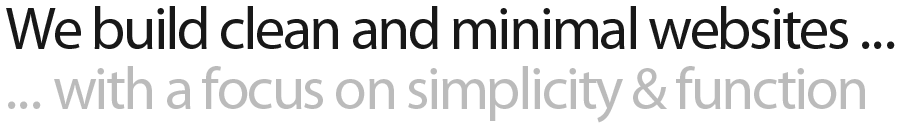
<style>
.page{position:relative;width:899px;height:127px;background:#ffffff}
.page>*{position:absolute;margin:0}
.t1{font:60px/60px "MyriadPro-Regular";letter-spacing:-0.04em;color:#bbbbbb}
.t2{font:60px/60px "MyriadPro-Regular";letter-spacing:-0.04em;color:#181818}
.t3{font:60px/60px "MyriadPro-Regular";color:#181818}
.t4{font:60px/60px "MyriadPro-Regular";color:#bbbbbb}
</style>
<div class="page">
<p class="t1" style="left:6px;top:6px;width:889px;height:117px"><span class="t2">We build clean and minimal websites </span><span class="t3">...<br></span><span class="t4">...</span> with a focus on simplicity &amp; function</p>
</div>
